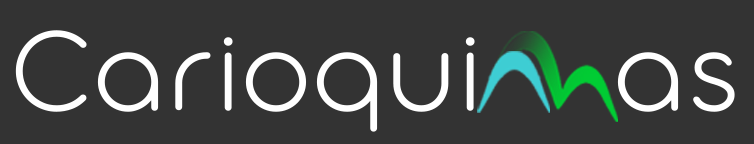
<style>
.page{position:relative;width:754px;height:144px;background:#333333}
.page>*{position:absolute;margin:0}
.t1{font:121.9px "AristotelicaDisplayTrial-ExLt";letter-spacing:0.01em;color:#ffffff;font-weight:bold}
</style>
<div class="page">
<p class="t1" style="left:15px;top:30px;width:720px;height:102px">Carioqui    as</p>
</div>
